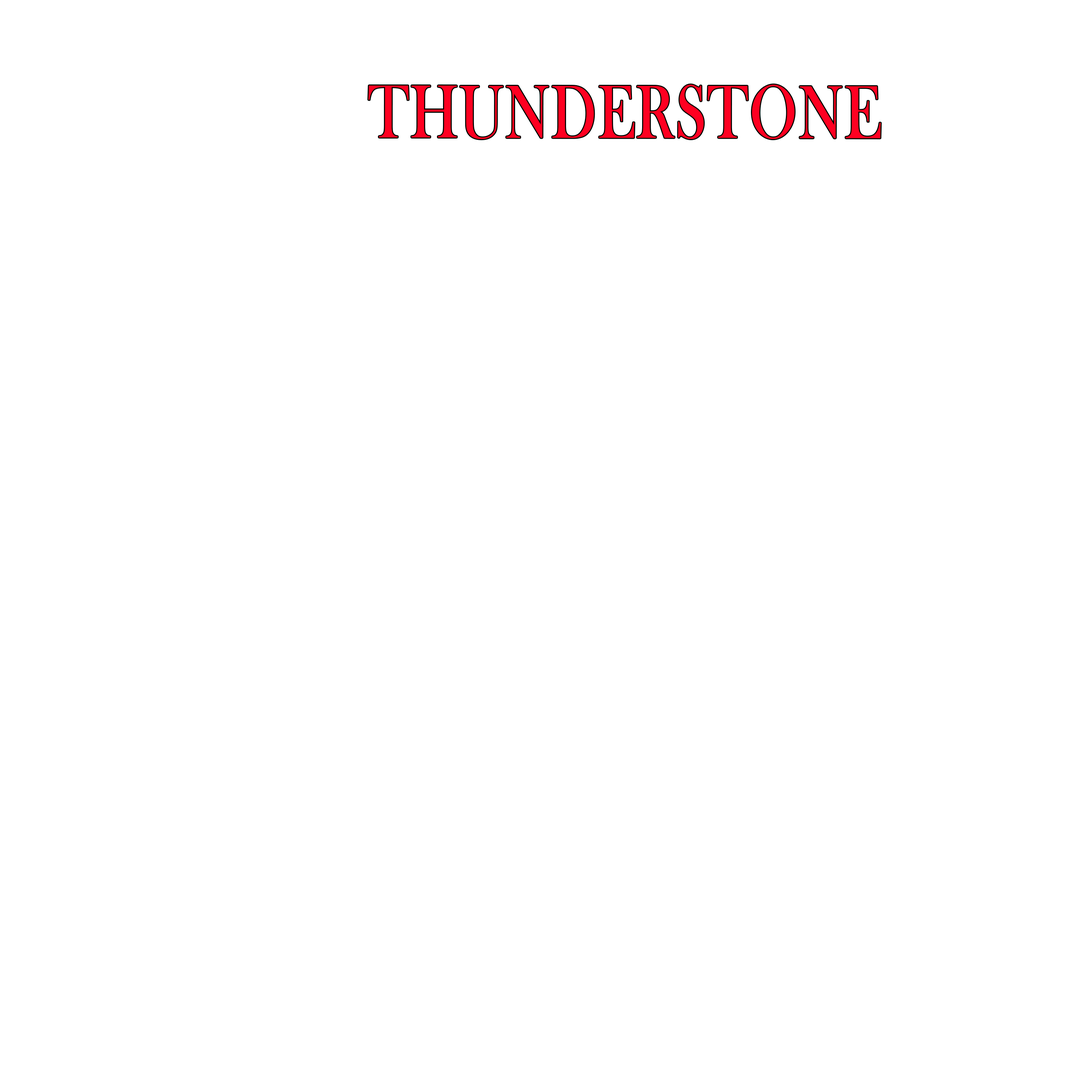
<style>
.page{position:relative;width:1092px;height:1092px;background:#ffffff}
.page>*{position:absolute;margin:0}
.t1{font:77.3px "BaskOldFace";color:#ff0021;font-weight:bold;scale:0.76 1}
</style>
<div class="page">
<p class="t1" style="left:368px;top:84px;width:513px;height:55px">THUNDERSTONE</p>
</div>
